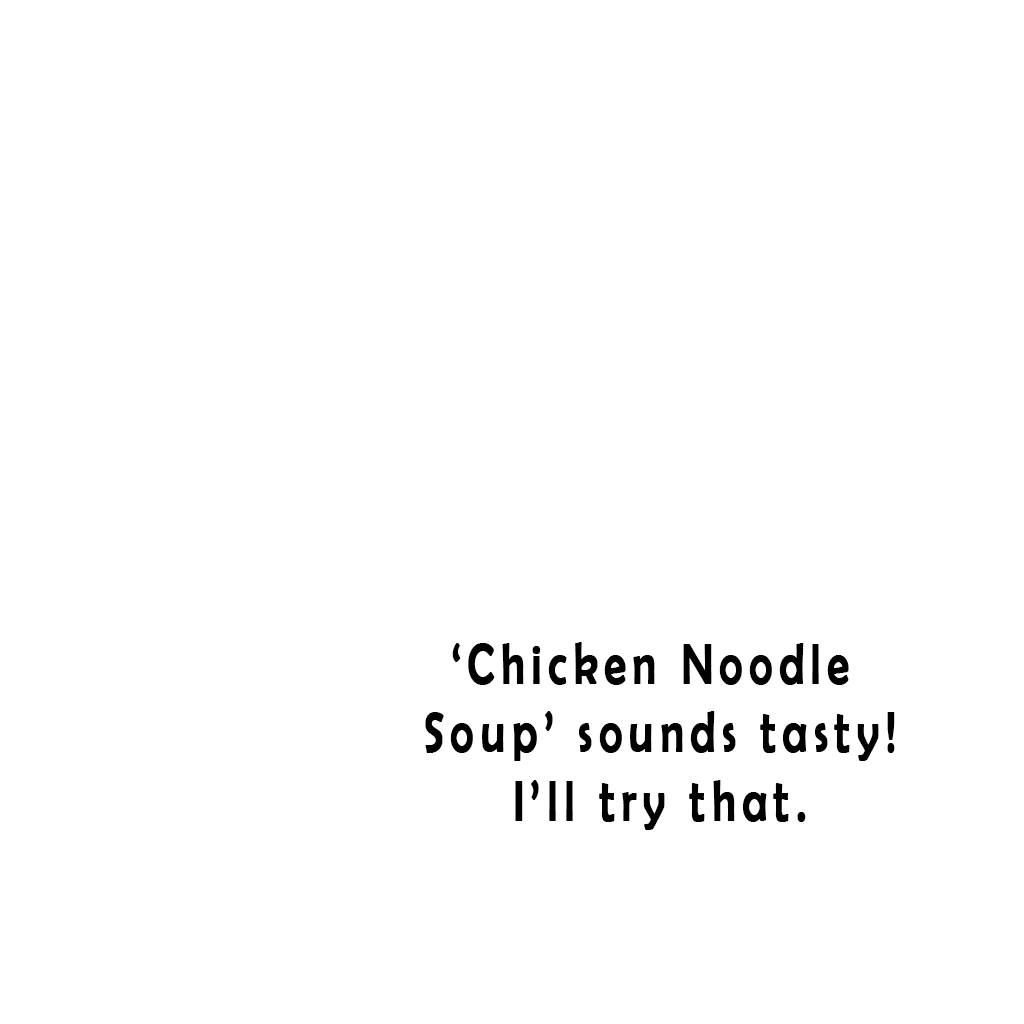
<style>
.page{position:relative;width:1024px;height:1024px;background:#ffffff}
.page>*{position:absolute;margin:0}
.t1{font:56.9px/68.4px "BerlinSansFB-Reg";letter-spacing:0.14em;color:#000000;font-weight:bold;scale:0.77 1}
</style>
<div class="page">
<p class="t1" style="left:425px;top:642px;width:470px;height:188px;text-align:center">‘Chicken Noodle <br>Soup’ sounds tasty!<br>I’ll try that.</p>
</div>
